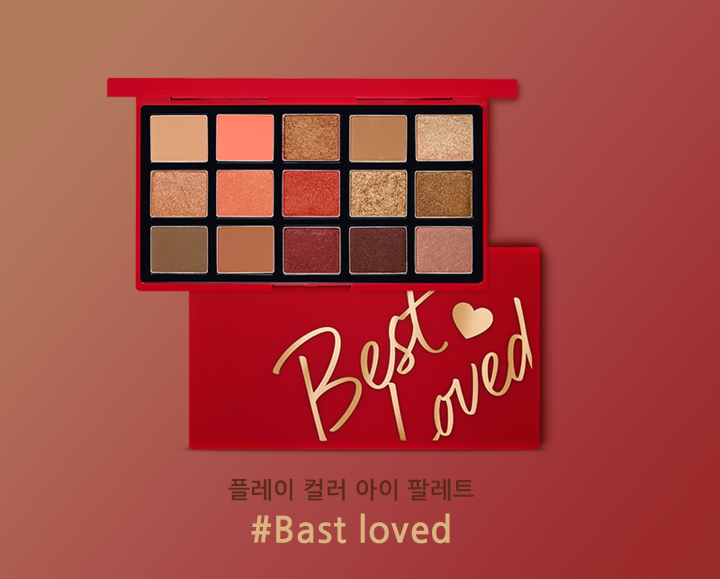
<style>
.page{position:relative;width:720px;height:579px}
.page>*{position:absolute;margin:0}
.t1{font:23.1px "NanumGothicBold";letter-spacing:0.025em;color:#5d2c17}
.t2{font:36px "NanumGothicBold";letter-spacing:0.025em;color:#dbb37e}
</style>
<div class="page">
<p class="t1" style="left:228px;top:478px;width:246px;height:66px;text-align:center">플레이 컬러 아이 팔레트<br><span class="t2">#Bast loved</span></p>
</div>
